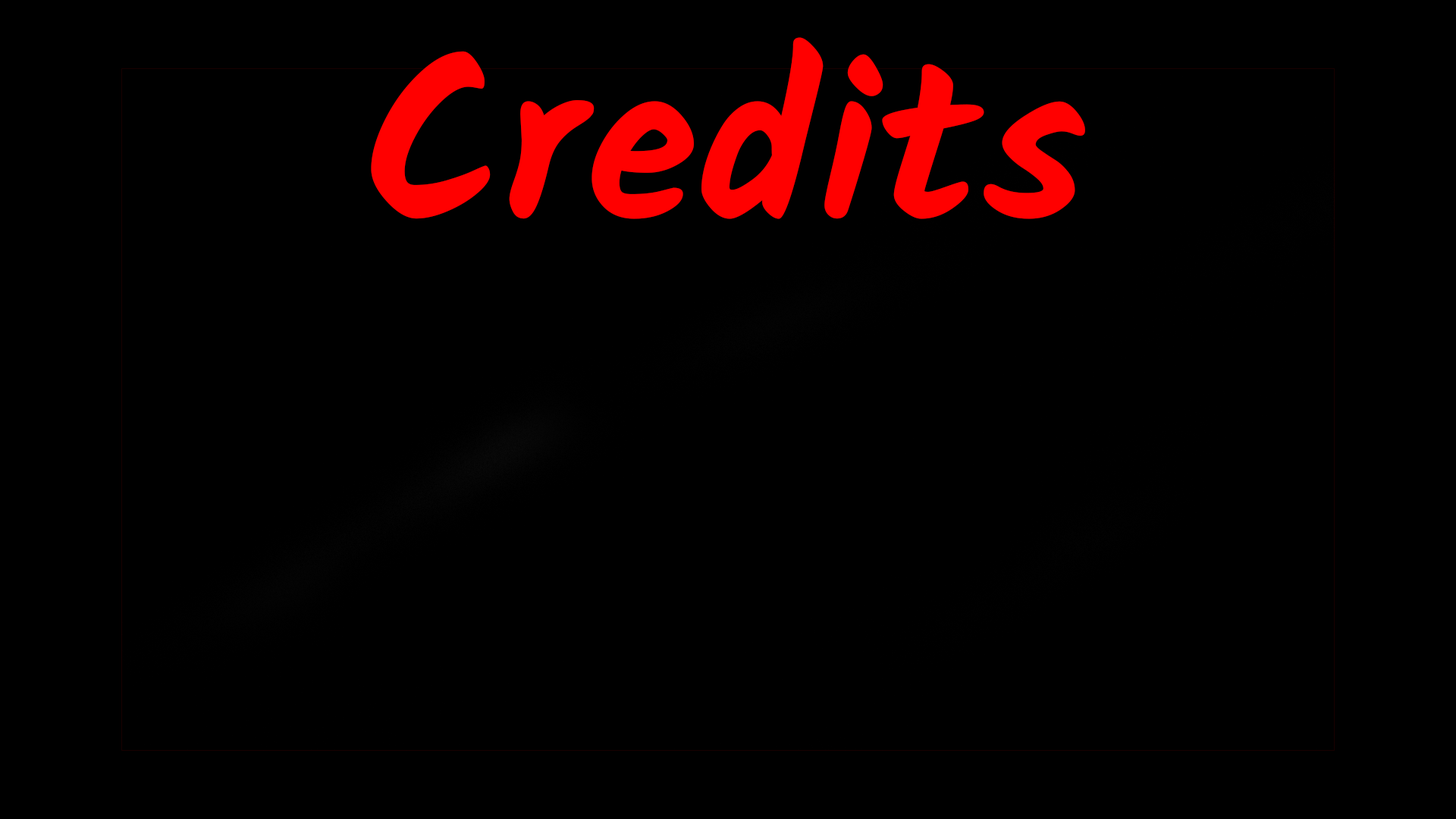
<style>
.page{position:relative;width:1456px;height:819px;background:#000000}
.page>*{position:absolute;margin:0}
.t1{font:227.5px "Kalam-Bold";color:#ff0000}
</style>
<div class="page">
<p class="t1" style="left:371px;top:37px;width:714px;height:182px">Credits</p>
</div>
